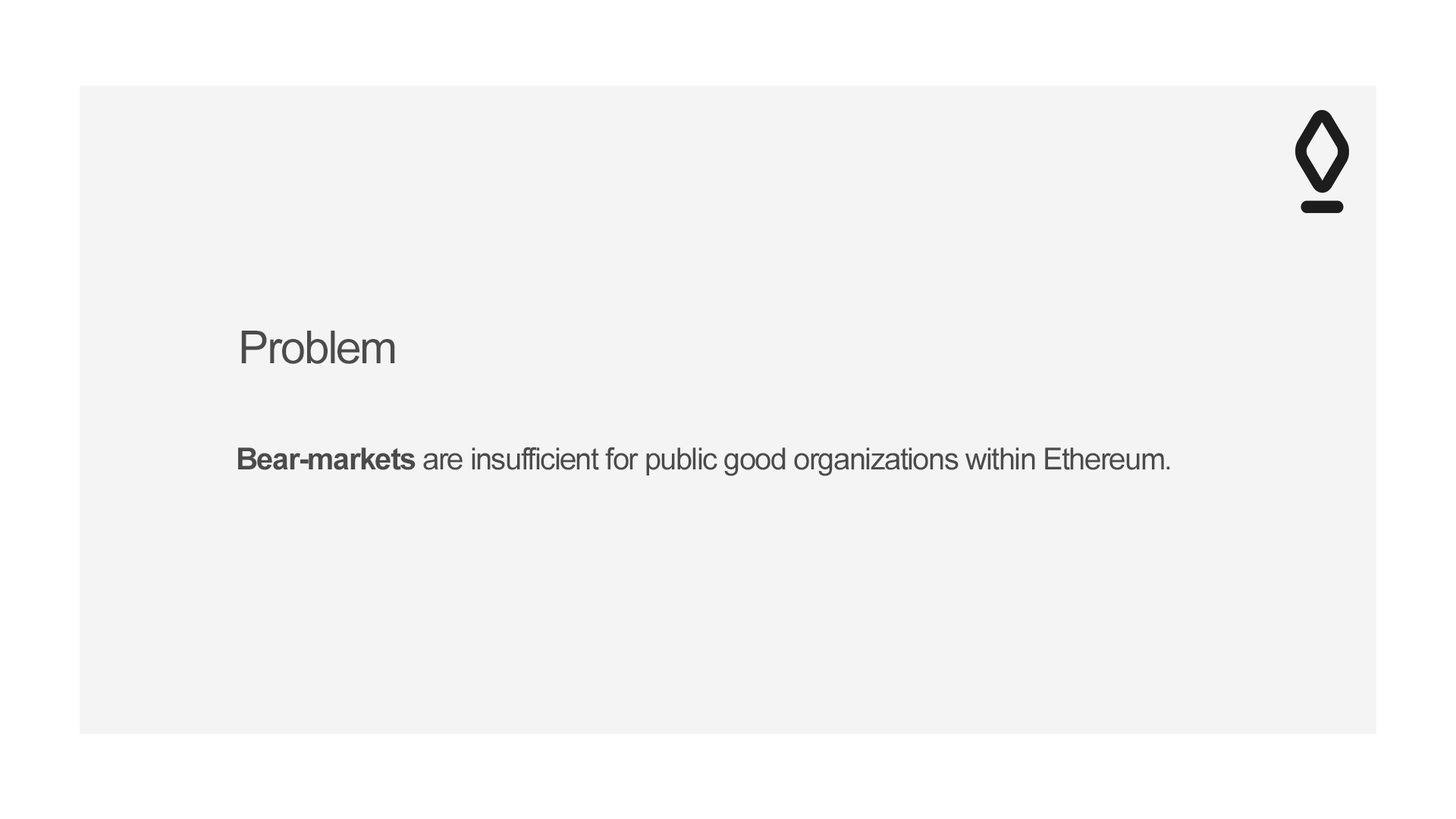
<style>
.page{position:relative;width:1456px;height:819px;background:#f4f4f4}
.page>*{position:absolute;margin:0}
.t1{font:45.5px "ArialMT";letter-spacing:-0.04em;color:#4b4b4b}
.t2{font:30.3px "ArialMT";letter-spacing:-0.04em;color:#4b4b4b}
.t3{font:30.3px "Arial-BoldMT";letter-spacing:-0.04em;color:#4b4b4b}
</style>
<div class="page">
<p class="t1" style="left:241px;top:331px;width:154px;height:33px">Problem</p>
<p class="t2" style="left:238px;top:447px;width:932px;height:29px"><span class="t3">Bear-markets </span>are insufficient for public good organizations within Ethereum.</p>
</div>
